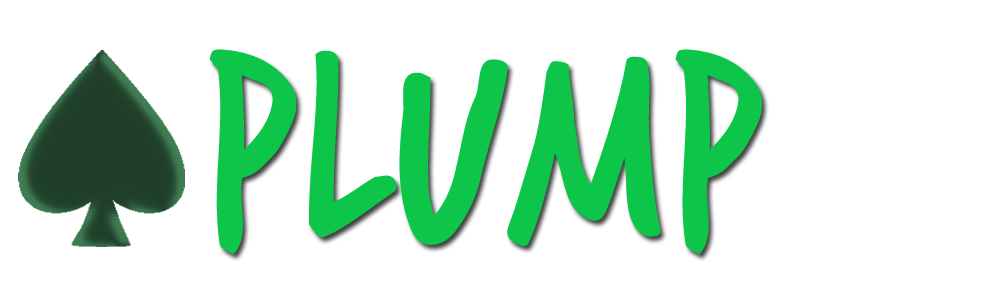
<style>
.page{position:relative;width:1000px;height:300px;background:#ffffff}
.page>*{position:absolute;margin:0}
.t1{font:291.7px "TrashHand";color:#0cc549}
</style>
<div class="page">
<p class="t1" style="left:209px;top:49px;width:554px;height:206px">PLUMP</p>
</div>
